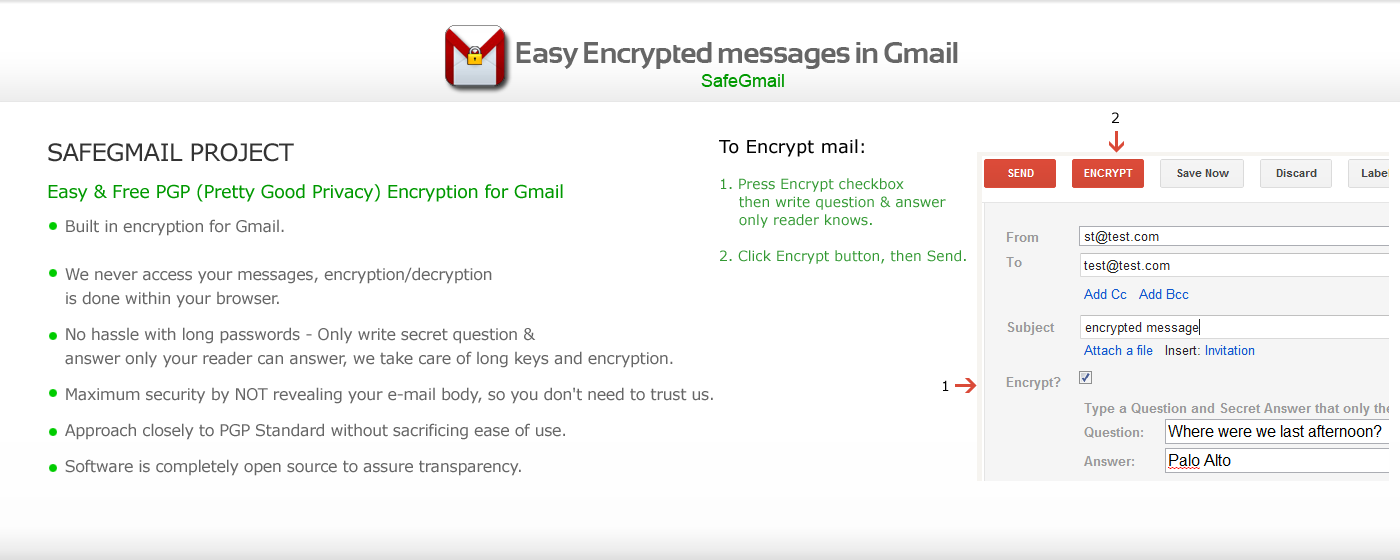
<style>
.page{position:relative;width:1400px;height:560px;background:#ffffff}
.page>*{position:absolute;margin:0}
.t1{font:30px "Sansation-Bold";letter-spacing:-0.025em;color:#666666}
.t2{font:18px "ArialMT";color:#009900}
.t3{font:14px "Verdana";color:#000000}
.t4{font:24px "Verdana";letter-spacing:-0.025em;color:#333333}
.t5{font:14px/18px "Verdana";color:#339933}
.t6{font:18px/18px "Verdana";color:#000000}
.t7{font:18px "Verdana";letter-spacing:-0.025em;color:#009900}
.t8{font:16px/12px "Verdana";letter-spacing:-0.025em;color:#666666}
</style>
<div class="page">
<p class="t1" style="left:516px;top:42px;width:442px;height:27px">Easy Encrypted messages in Gmail</p>
<p class="t2" style="left:701px;top:74px;width:83px;height:13px">SafeGmail</p>
<p class="t3" style="left:1112px;top:112px;width:7px;height:11px">2</p>
<p class="t4" style="left:48px;top:143px;width:246px;height:19px">SAFEGMAIL PROJECT</p>
<p class="t5" style="left:719px;top:139px;width:247px;height:125px"><span class="t6">To Encrypt mail:<br><br></span>1. Press Encrypt checkbox<br>    then write question &amp; answer<br>    only reader knows.                     <br><br>2. Click Encrypt button, then Send.</p>
<p class="t7" style="left:48px;top:184px;width:515px;height:18px">Easy &amp; Free PGP (Pretty Good Privacy) Encryption for Gmail</p>
<p class="t8" style="left:65px;top:219px;width:648px;height:257px">Built in encryption for Gmail.<br><br><br><br>We never access your messages, encryption/decryption <br><br>is done within your browser.  <br><br><br>No hassle with long passwords - Only write secret question &amp; <br><br>answer only your reader can answer, we take care of long keys and encryption.<br>  <br><br>Maximum security by NOT revealing your e-mail body, so you don't need to trust us.<br>  <br><br>Approach closely to PGP Standard without sacrificing ease of use.<br>  <br><br>Software is completely open source to assure transparency.</p>
<p class="t3" style="left:943px;top:380px;width:6px;height:11px">1</p>
</div>
